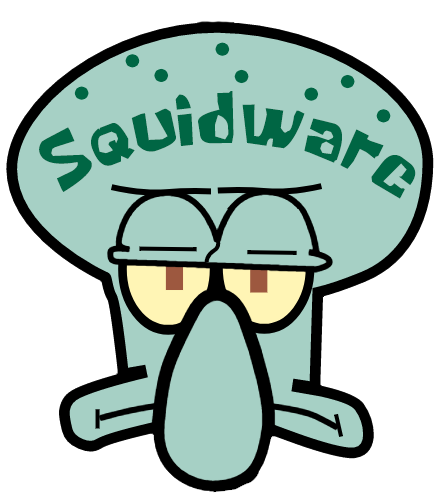
<style>
.page{position:relative;width:440px;height:500px;background:#a6d0c5}
.page>*{position:absolute;margin:0}
.t1{font:72px "KrabbyPatty";color:#006644}
</style>
<div class="page">
<p class="t1" style="left:39px;top:91px;width:377px;height:108px">Squidwarc</p>
</div>
